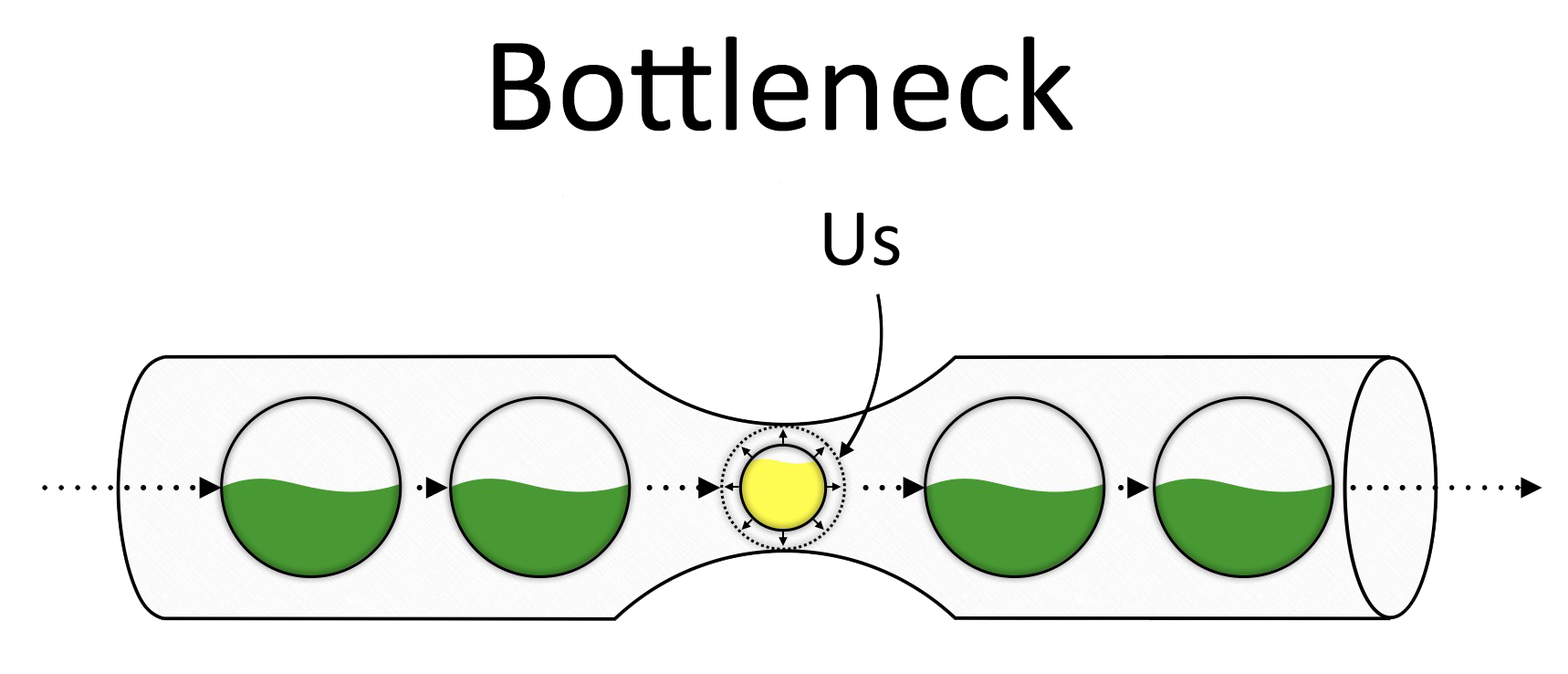
<style>
.page{position:relative;width:1568px;height:674px;background:#ffffff}
.page>*{position:absolute;margin:0}
.t1{font:136.9px "Calibri";color:#000000}
.t2{font:82.1px "Calibri";color:#000000}
</style>
<div class="page">
<p class="t1" style="left:493px;top:37px;width:580px;height:94px">Bottleneck</p>
<p class="t2" style="left:824px;top:212px;width:76px;height:54px">Us</p>
</div>
